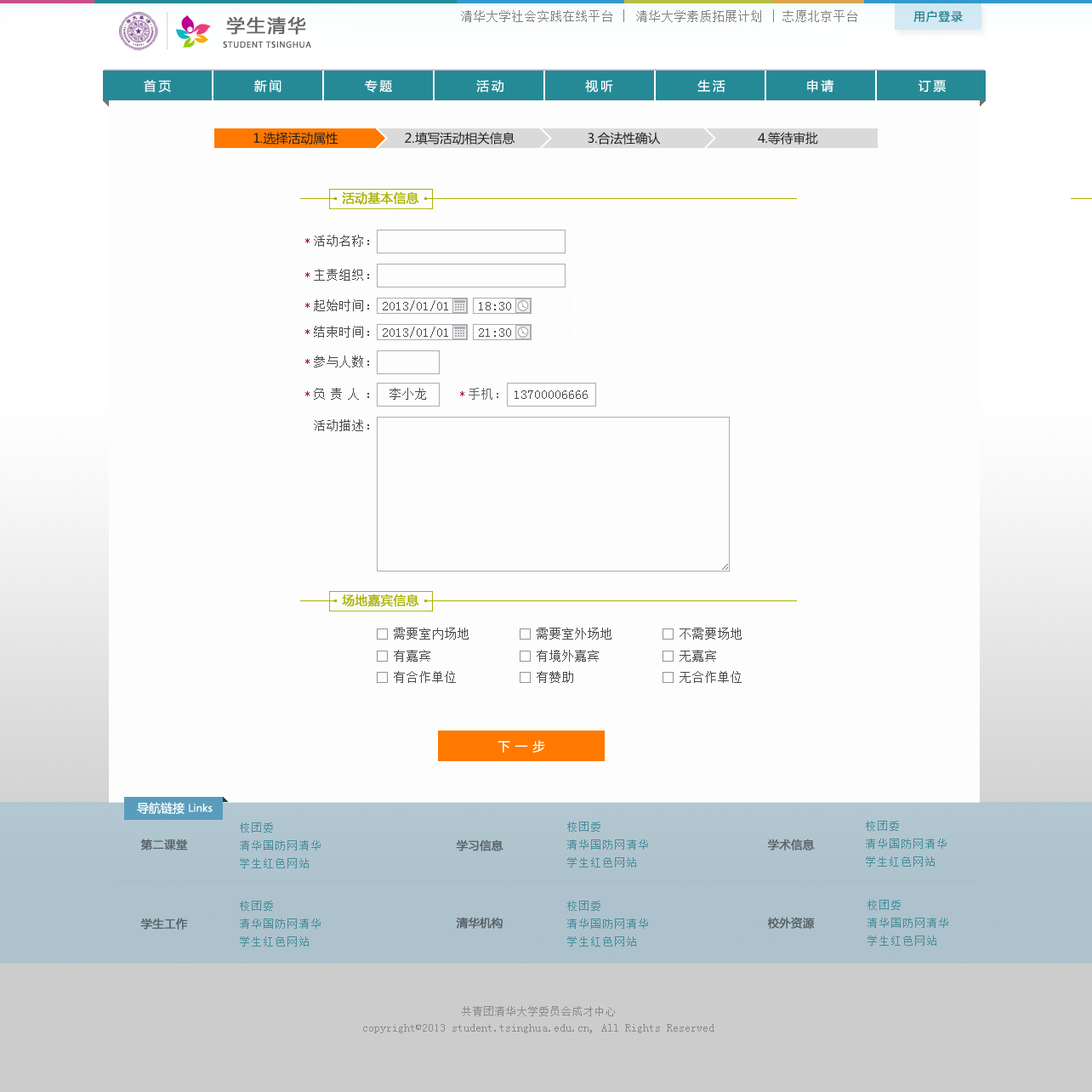
<style>
.page{position:relative;width:1092px;height:1092px;background:#fdfdfd}
.page>*{position:absolute;margin:0}
.t1{font:18.1px "MicrosoftYaHei";letter-spacing:0.1em;color:#666666;font-weight:bold}
.t2{font:11.9px "SimSun";letter-spacing:0.075em;color:#808080}
.t3{font:12.5px "SimSun";letter-spacing:0.075em;color:#808080}
.t4{font:11.3px "MicrosoftYaHei";letter-spacing:0.1em;color:#237e89}
.t5{font:9.1px "MyriadPro-Regular";letter-spacing:0.075em;color:#666666}
.t6{font:12.5px "MicrosoftYaHei";letter-spacing:0.2em;color:#ffffff}
.t7{font:12.5px "MicrosoftYaHei";color:#202020}
.t8{font:12.5px "MicrosoftYaHei";color:#aab300;font-weight:bold}
.t9{font:11.3px "SimSun";color:#ac0040}
.t10{font:12.5px "SimSun";color:#484848}
.t11{font:12.5px "SimSun";color:#666666}
.t12{font:12.5px "MicrosoftYaHei";letter-spacing:0.4em;color:#ffffff}
.t13{font:10.2px "MicrosoftYaHei";color:#ffffff}
.t14{font:11.9px "MicrosoftYaHei";color:#ffffff}
.t15{font:11.3px/18.1px "SimSun";letter-spacing:0.075em;color:#478d9a}
.t16{font:11.3px "MicrosoftYaHei";color:#586267;font-weight:bold}
.t17{font:11.3px/18.1px "SimSun";letter-spacing:0.075em;color:#478d99}
.t18{font:11.3px "MicrosoftYaHei";color:#566166;font-weight:bold}
.t19{font:11.3px/15.9px "SimSun";color:#8a8a8a}
</style>
<div class="page">
<p class="t1" style="left:226px;top:16px;width:80px;height:19px">学生清华</p>
<p class="t2" style="left:461px;top:9px;width:396px;height:13px">清华大学社会实践在线平台 <span class="t3">| </span>清华大学素质拓展计划 <span class="t3">| </span>志愿北京平台</p>
<p class="t4" style="left:913px;top:10px;width:50px;height:12px">用户登录</p>
<p class="t5" style="left:223px;top:41px;width:88px;height:7px">STUDENT TSINGHUA</p>
<p class="t6" style="left:144px;top:79px;width:27px;height:14px">首页</p>
<p class="t6" style="left:254px;top:79px;width:28px;height:14px">新闻</p>
<p class="t6" style="left:365px;top:80px;width:27px;height:13px">专题</p>
<p class="t6" style="left:476px;top:80px;width:27px;height:13px">活动</p>
<p class="t6" style="left:585px;top:80px;width:28px;height:13px">视听</p>
<p class="t6" style="left:697px;top:79px;width:28px;height:14px">生活</p>
<p class="t6" style="left:807px;top:79px;width:26px;height:14px">申请</p>
<p class="t6" style="left:918px;top:80px;width:28px;height:12px">订票</p>
<p class="t7" style="left:253px;top:132px;width:85px;height:13px">1.选择活动属性</p>
<p class="t7" style="left:405px;top:132px;width:110px;height:13px">2.填写活动相关信息</p>
<p class="t7" style="left:588px;top:132px;width:73px;height:13px">3.合法性确认</p>
<p class="t7" style="left:758px;top:132px;width:60px;height:13px">4.等待审批</p>
<p class="t8" style="left:342px;top:191px;width:77px;height:14px">活动基本信息</p>
<p class="t9" style="left:305px;top:238px;width:5px;height:5px">*</p>
<p class="t10" style="left:314px;top:235px;width:55px;height:12px">活动名称：</p>
<p class="t10" style="left:314px;top:269px;width:55px;height:12px">主责组织：</p>
<p class="t9" style="left:305px;top:272px;width:5px;height:5px">*</p>
<p class="t9" style="left:305px;top:303px;width:5px;height:5px">*</p>
<p class="t10" style="left:314px;top:299px;width:55px;height:12px">起始时间：</p>
<p class="t10" style="left:383px;top:300px;width:65px;height:11px">2013/01/01</p>
<p class="t10" style="left:479px;top:302px;width:32px;height:8px">18:30</p>
<p class="t9" style="left:305px;top:329px;width:5px;height:5px">*</p>
<p class="t10" style="left:314px;top:326px;width:55px;height:12px">结束时间：</p>
<p class="t10" style="left:383px;top:327px;width:65px;height:11px">2013/01/01</p>
<p class="t10" style="left:479px;top:328px;width:32px;height:9px">21:30</p>
<p class="t9" style="left:305px;top:359px;width:5px;height:5px">*</p>
<p class="t10" style="left:314px;top:355px;width:55px;height:12px">参与人数：</p>
<p class="t10" style="left:314px;top:388px;width:55px;height:12px">负责人：</p>
<p class="t10" style="left:390px;top:388px;width:36px;height:12px">李小龙</p>
<p class="t11" style="left:469px;top:388px;width:29px;height:12px">手机：</p>
<p class="t9" style="left:305px;top:391px;width:5px;height:5px">*</p>
<p class="t9" style="left:460px;top:391px;width:4px;height:5px">*</p>
<p class="t10" style="left:515px;top:390px;width:73px;height:9px">13700006666</p>
<p class="t10" style="left:314px;top:419px;width:55px;height:12px">活动描述：</p>
<p class="t8" style="left:342px;top:594px;width:77px;height:13px">场地嘉宾信息</p>
<p class="t10" style="left:394px;top:628px;width:75px;height:12px">需要室内场地</p>
<p class="t10" style="left:537px;top:628px;width:74px;height:12px">需要室外场地</p>
<p class="t10" style="left:680px;top:628px;width:62px;height:12px">不需要场地</p>
<p class="t10" style="left:394px;top:650px;width:36px;height:12px">有嘉宾</p>
<p class="t10" style="left:537px;top:650px;width:62px;height:12px">有境外嘉宾</p>
<p class="t10" style="left:680px;top:650px;width:36px;height:12px">无嘉宾</p>
<p class="t10" style="left:394px;top:671px;width:62px;height:12px">有合作单位</p>
<p class="t10" style="left:537px;top:671px;width:36px;height:12px">有赞助</p>
<p class="t10" style="left:680px;top:671px;width:62px;height:12px">无合作单位</p>
<p class="t12" style="left:498px;top:740px;width:47px;height:13px">下一步</p>
<p class="t13" style="left:137px;top:802px;width:76px;height:13px"><span class="t14">导航链接 </span>Links</p>
<p class="t15" style="left:567px;top:822px;width:81px;height:45px">校团委<br>清华国防网清华<br>学生红色网站</p>
<p class="t15" style="left:866px;top:821px;width:81px;height:46px">校团委<br>清华国防网清华<br>学生红色网站</p>
<p class="t15" style="left:240px;top:822px;width:81px;height:46px">校团委<br>清华国防网清华<br>学生红色网站</p>
<p class="t16" style="left:140px;top:839px;width:48px;height:11px">第二课堂</p>
<p class="t16" style="left:456px;top:839px;width:47px;height:12px">学习信息</p>
<p class="t16" style="left:767px;top:839px;width:48px;height:11px">学术信息</p>
<p class="t17" style="left:240px;top:901px;width:81px;height:46px">校团委<br>清华国防网清华<br>学生红色网站</p>
<p class="t17" style="left:567px;top:901px;width:81px;height:46px">校团委<br>清华国防网清华<br>学生红色网站</p>
<p class="t17" style="left:867px;top:900px;width:81px;height:46px">校团委<br>清华国防网清华<br>学生红色网站</p>
<p class="t18" style="left:140px;top:918px;width:48px;height:12px">学生工作</p>
<p class="t18" style="left:456px;top:917px;width:47px;height:12px">清华机构</p>
<p class="t18" style="left:767px;top:917px;width:48px;height:12px">校外资源</p>
<p class="t19" style="left:363px;top:1006px;width:351px;height:27px;text-align:center">共青团清华大学委员会成才中心<br>copyright©2013 student.tsinghua.edu.cn, All Rights Reserved</p>
</div>
